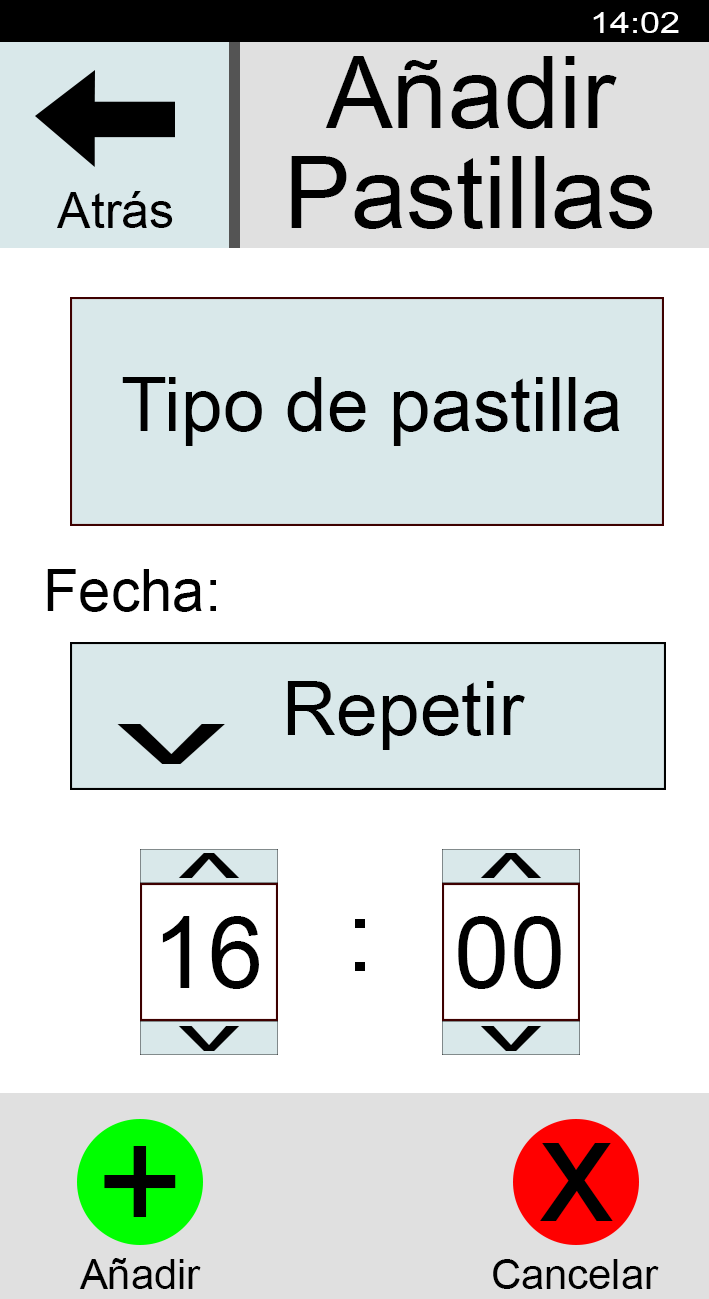
<style>
.page{position:relative;width:709px;height:1299px;background:#ffffff}
.page>*{position:absolute;margin:0}
.t1{font:29.2px "ArialMT";color:#ffffff;scale:1.22 1}
.t2{font:100px/100px "ArialMT";color:#000000}
.t3{font:50px "ArialMT";color:#000000}
.t4{font:75px "ArialMT";color:#000000}
.t5{font:58.3px "ArialMT";color:#000000}
.t6{font:74.8px "ArialMT";color:#000000}
.t7{font:104.1px "ArialMT";color:#000000;scale:2.48 1}
.t8{font:64.6px "ArialMT";color:#000000;scale:2.24 1}
.t9{font:100px "ArialMT";color:#000000}
.t10{font:150px "ArialMT";color:#000000}
.t11{font:41.7px "ArialMT";color:#000000}
</style>
<div class="page">
<p class="t1" style="left:593px;top:12px;width:86px;height:21px">14:02</p>
<p class="t2" style="left:291px;top:56px;width:362px;height:173px;text-align:center">Añadir<br>Pastillas</p>
<p class="t3" style="left:57px;top:191px;width:116px;height:37px">Atrás</p>
<p class="t4" style="left:122px;top:377px;width:498px;height:69px">Tipo de pastilla</p>
<p class="t5" style="left:47px;top:569px;width:169px;height:43px">Fecha:</p>
<p class="t6" style="left:287px;top:681px;width:238px;height:69px">Repetir</p>
<p class="t7" style="left:117px;top:724px;width:108px;height:40px;rotate:180deg">^</p>
<p class="t8" style="left:178px;top:853px;width:62px;height:25px">^</p>
<p class="t8" style="left:480px;top:853px;width:62px;height:25px">^</p>
<p class="t9" style="left:162px;top:916px;width:97px;height:73px">16</p>
<p class="t9" style="left:458px;top:916px;width:103px;height:73px">00</p>
<p class="t9" style="left:355px;top:919px;width:10px;height:52px">:</p>
<p class="t8" style="left:178px;top:1026px;width:62px;height:25px;rotate:180deg">^</p>
<p class="t8" style="left:480px;top:1026px;width:62px;height:25px;rotate:180deg">^</p>
<p class="t10" style="left:540px;top:1143px;width:73px;height:78px">x</p>
<p class="t10" style="left:104px;top:1146px;width:72px;height:71px">+</p>
<p class="t11" style="left:79px;top:1258px;width:122px;height:31px">Añadir</p>
<p class="t11" style="left:493px;top:1259px;width:166px;height:30px">Cancelar</p>
</div>
